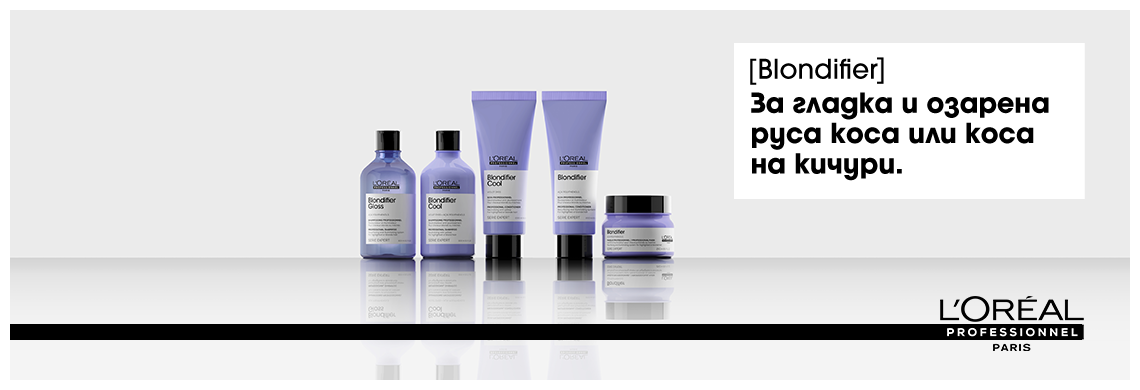
<style>
.page{position:relative;width:1140px;height:390px;background:#ebebeb}
.page>*{position:absolute;margin:0}
.t1{font:26.9px "ITCAvantGardeStd-Md";color:#000000}
.t2{font:26.9px "ITCAvantGardeStd-MdCn";color:#000000}
.t3{font:27.3px/30.4px "SPAvant-Bold";letter-spacing:-0.01em;color:#000000}
</style>
<div class="page">
<p class="t1" style="left:750px;top:58px;width:128px;height:27px"><span class="t2">[</span>Blondifier</p>
<p class="t3" style="left:751px;top:92px;width:298px;height:89px">За гладка и озарена <br>руса коса или коса <br>на кичури.</p>
</div>
